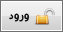
<style>
.page{position:relative;width:63px;height:32px}
.page>*{position:absolute;margin:0}
.t1{font:12px "Mj_CasablancaLight";color:#030000}
</style>
<div class="page">
<p class="t1" style="left:9px;top:13px;width:20px;height:9px">ورود</p>
</div>
